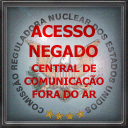
<style>
.page{position:relative;width:128px;height:128px}
.page>*{position:absolute;margin:0}
.t1{font:16px/20px "Tahoma-Bold";letter-spacing:-0.02em;text-transform:uppercase;scale:1.03 1}
.t2{font:10.3px/12.9px "Tahoma-Bold";letter-spacing:-0.02em;text-transform:uppercase}
</style>
<div class="page">
<p class="t1" style="left:29px;top:25px;width:69px;height:33px;text-align:center">ACESSO<br>NEGADO</p>
<p class="t2" style="left:24px;top:64px;width:80px;height:34px;text-align:center">CENTRAL DE<br>COMUNICAÇÃO<br>FORA DO AR</p>
</div>
